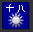
<style>
.page{position:relative;width:33px;height:32px;background:#000090}
.page>*{position:absolute;margin:0}
.t1{font:10.4px "SimSun";color:#ffffff}
</style>
<div class="page">
<p class="t1" style="left:6px;top:4px;width:19px;height:9px">十八</p>
</div>
